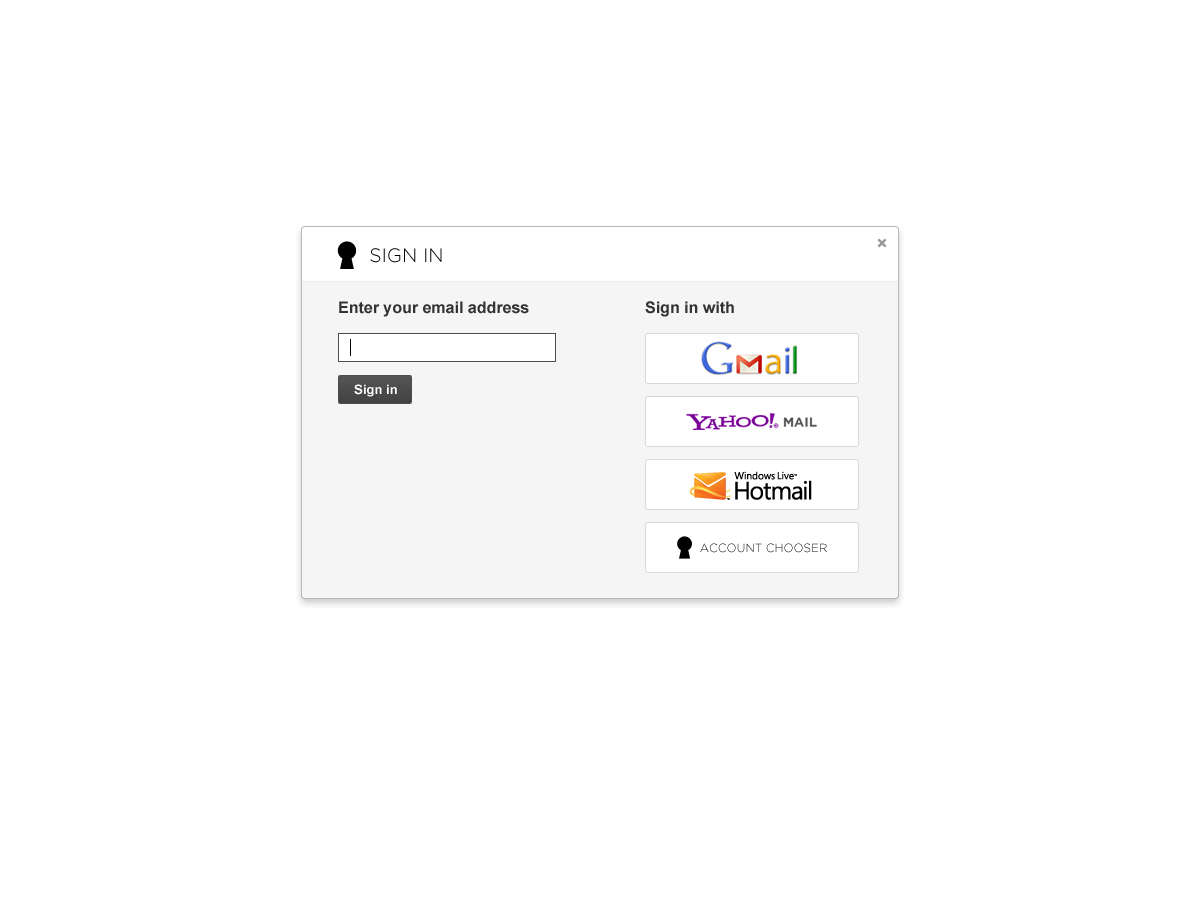
<style>
.page{position:relative;width:1200px;height:900px;background:#ffffff}
.page>*{position:absolute;margin:0}
.t1{font:19.3px "Gotham-Light";color:#000000;text-transform:uppercase}
.t2{font:16px "Arial-BoldMT";color:#333333}
.t3{font:13px "Arial-BoldMT";color:#ffffff}
.t4{font:11.8px "Gotham-Light";text-transform:uppercase}
</style>
<div class="page">
<p class="t1" style="left:370px;top:248px;width:72px;height:15px">SIGN IN</p>
<p class="t2" style="left:339px;top:301px;width:190px;height:16px">Enter your email address</p>
<p class="t2" style="left:645px;top:301px;width:89px;height:16px">Sign in with</p>
<p class="t3" style="left:354px;top:384px;width:43px;height:13px">Sign in</p>
<p class="t4" style="left:700px;top:543px;width:127px;height:10px">ACCOUNT CHOOSER</p>
</div>
